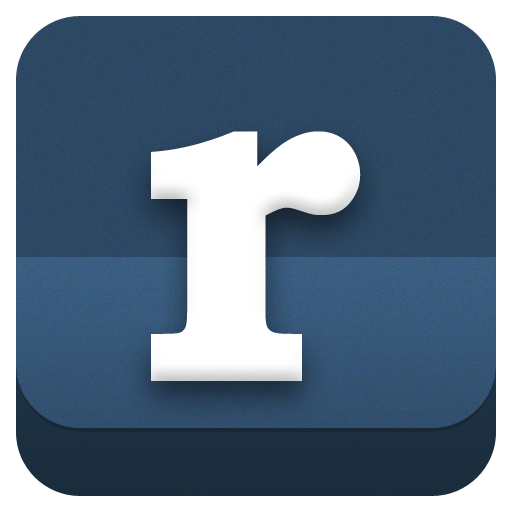
<style>
.page{position:relative;width:512px;height:512px;background:#ffffff}
.page>*{position:absolute;margin:0}
.t1{font:500px "BookmanOldStyle-Bold";color:#ffffff}
</style>
<div class="page">
<p class="t1" style="left:151px;top:131px;width:210px;height:250px">r</p>
</div>
